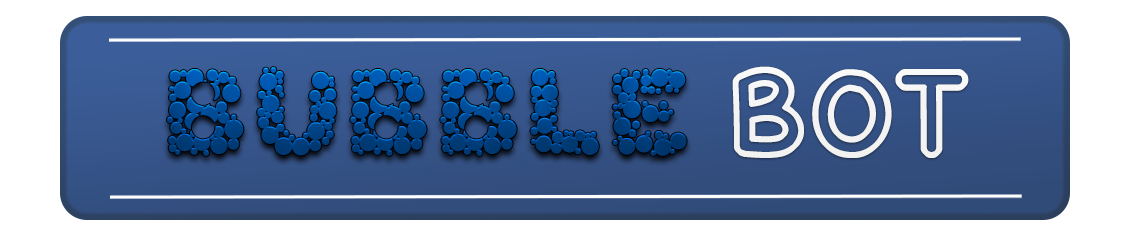
<style>
.page{position:relative;width:1137px;height:244px;background:#ffffff}
.page>*{position:absolute;margin:0}
.t1{font:128px "BubbleRegular";letter-spacing:0.01em}
.t2{font:128px "BubbleLetters";letter-spacing:0.01em;color:#f4f4f4;font-weight:bold}
.t3{font:128px "BubbleRegular";letter-spacing:0.01em;color:#f4f4f4}
</style>
<div class="page">
<p class="t1" style="left:167px;top:67px;width:520px;height:89px">BUBBLE</p>
<p class="t2" style="left:732px;top:66px;width:237px;height:92px"><span class="t3">            </span>BOT</p>
</div>
